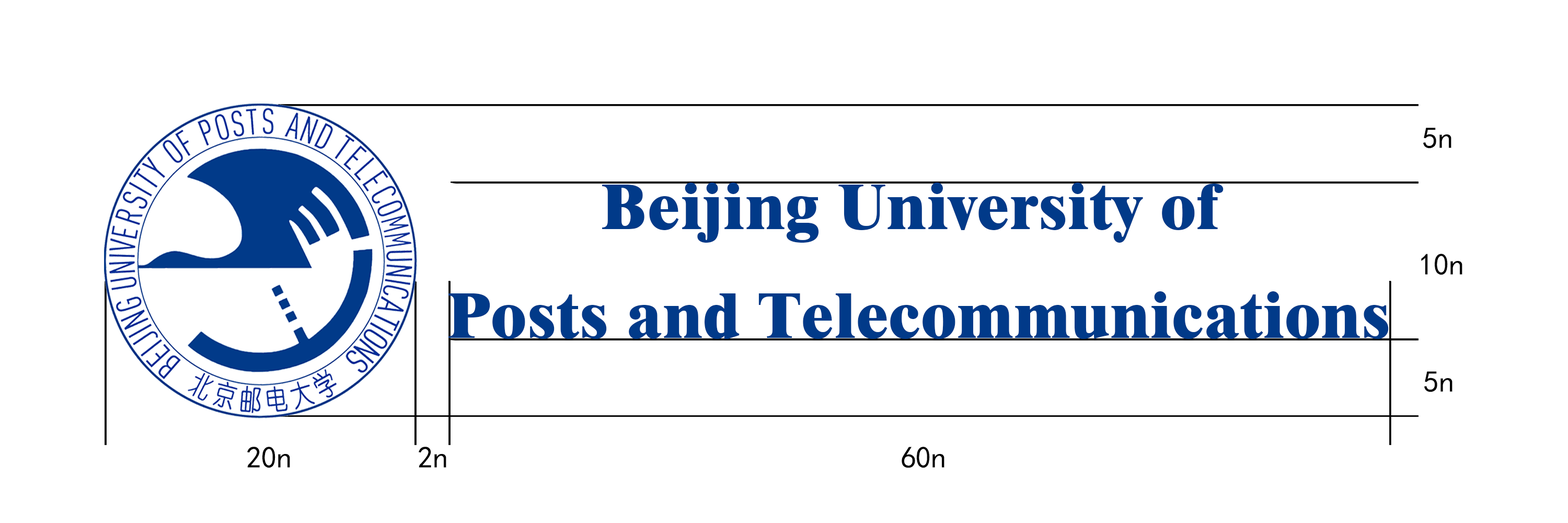
<style>
.page{position:relative;width:1568px;height:523px;background:#ffffff}
.page>*{position:absolute;margin:0}
.t1{font:30.5px "SimHei";color:#000000}
.t2{font:65.3px/108.9px "Dutch801BT-ExtraBold";letter-spacing:0.005em;color:#013a89}
</style>
<div class="page">
<p class="t1" style="left:1423px;top:128px;width:28px;height:20px">5n</p>
<p class="t2" style="left:448px;top:182px;width:941px;height:157px;text-align:center">Beijing University of <br>Posts and Telecommunications</p>
<p class="t1" style="left:1421px;top:253px;width:41px;height:22px">10n</p>
<p class="t1" style="left:1424px;top:371px;width:28px;height:21px">5n</p>
<p class="t1" style="left:247px;top:446px;width:43px;height:22px">20n</p>
<p class="t1" style="left:418px;top:446px;width:28px;height:21px">2n</p>
<p class="t1" style="left:902px;top:446px;width:42px;height:22px">60n</p>
</div>
